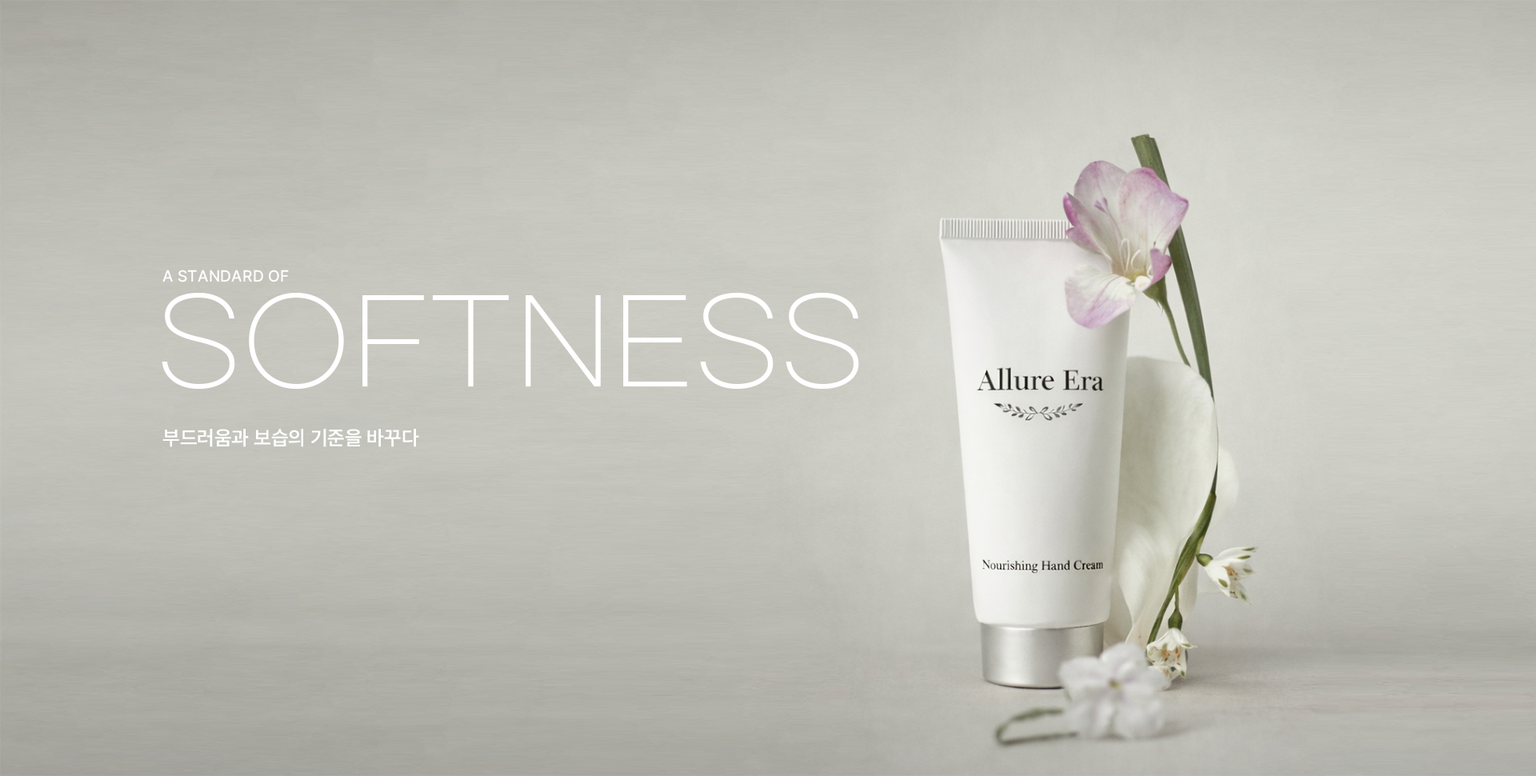
<style>
.page{position:relative;width:1536px;height:776px}
.page>*{position:absolute;margin:0}
.t1{font:16px "Pretendard-Medium";color:#ffffff;text-transform:uppercase}
.t2{font:116px "GmarketSansTTFLight";color:#ffffff;text-transform:uppercase}
.t3{font:20px "Pretendard-SemiBold";color:#ffffff}
</style>
<div class="page">
<p class="t1" style="left:162px;top:270px;width:127px;height:12px">A Standard of</p>
<p class="t2" style="left:162px;top:293px;width:697px;height:96px">Softness</p>
<p class="t3" style="left:162px;top:429px;width:257px;height:18px">부드러움과 보습의 기준을 바꾸다</p>
</div>
